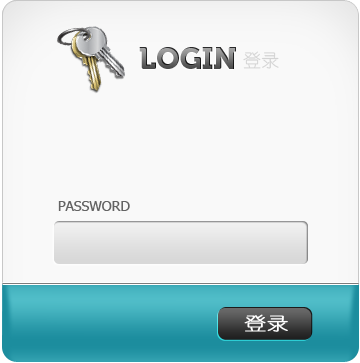
<style>
.page{position:relative;width:360px;height:363px;background:#f9f9f9}
.page>*{position:absolute;margin:0}
.t1{font:30px "Museo900-Regular";text-transform:uppercase}
.t2{font:18px "YouYuan";color:#d3d3d3;text-transform:uppercase}
.t3{font:14px "Tahoma";color:#646464;text-transform:uppercase}
.t4{font:18px "YouYuan";color:#ffffff;text-transform:uppercase;font-weight:bold;scale:1.2 1}
</style>
<div class="page">
<p class="t1" style="left:139px;top:47px;width:97px;height:22px">login</p>
<p class="t2" style="left:243px;top:51px;width:36px;height:18px">登录</p>
<p class="t3" style="left:58px;top:201px;width:72px;height:10px">password</p>
<p class="t4" style="left:244px;top:314px;width:44px;height:18px">登录</p>
</div>
